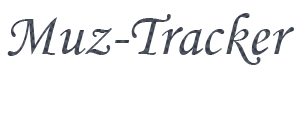
<style>
.page{position:relative;width:300px;height:116px;background:#ffffff}
.page>*{position:absolute;margin:0}
.t1{font:60.3px "MonotypeCorsiva";color:#474c57}
</style>
<div class="page">
<p class="t1" style="left:7px;top:13px;width:287px;height:52px">Muz-Tracker</p>
</div>
